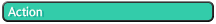
<style>
.page{position:relative;width:216px;height:24px;background:#33ccaa}
.page>*{position:absolute;margin:0}
.t1{font:13.2px "Amira-Roman";color:#ffffff;scale:0.91 1}
</style>
<div class="page">
<p class="t1" style="left:8px;top:6px;width:34px;height:11px">Action</p>
</div>
